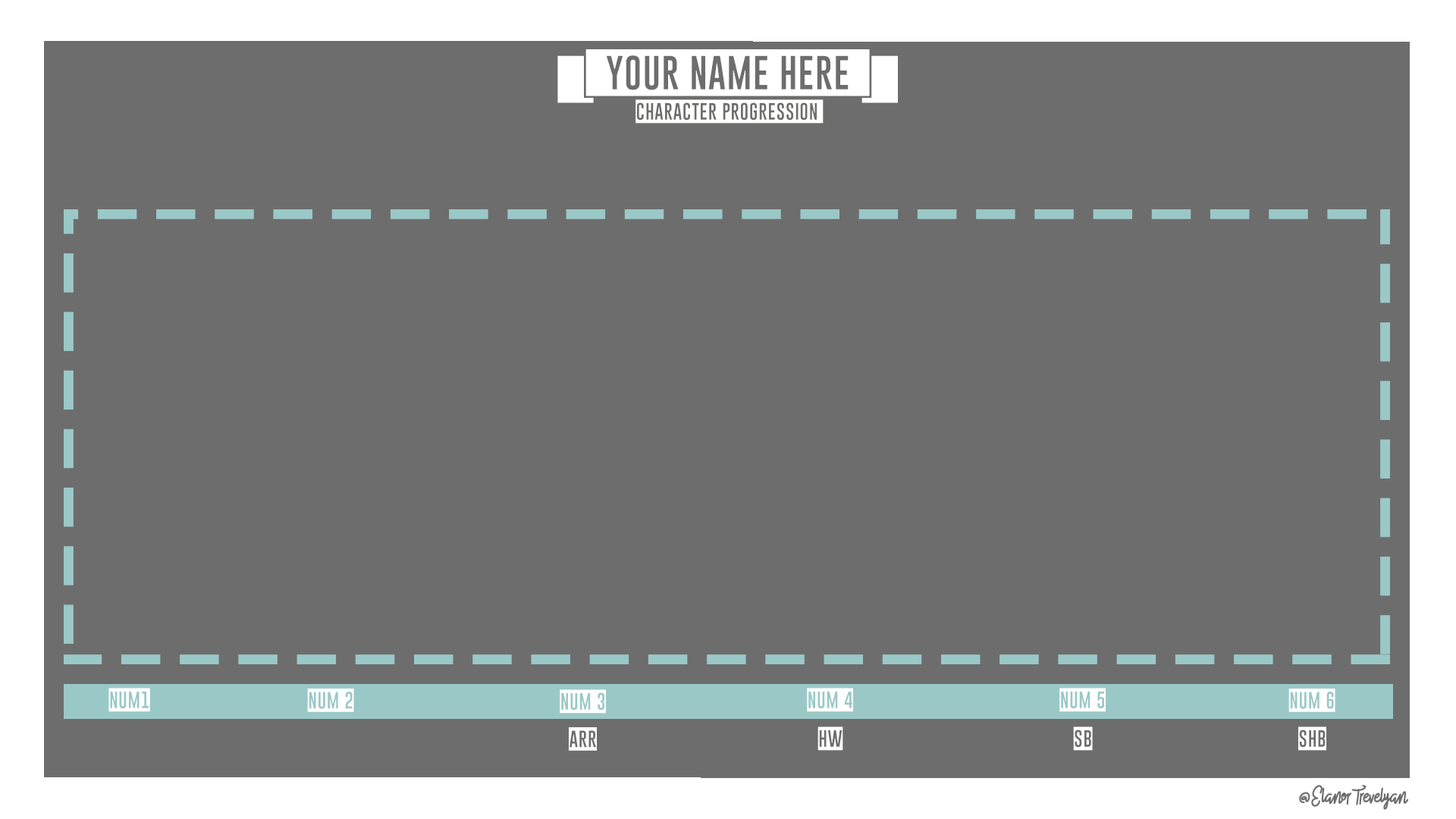
<style>
.page{position:relative;width:1456px;height:819px;background:#6d6d6d}
.page>*{position:absolute;margin:0}
.t1{font:45.5px "GoboldBlocky";letter-spacing:-0.025em;color:#ffffff;font-weight:bold}
.t2{font:22.7px "GoboldBlocky";letter-spacing:-0.025em;color:#fffffe;font-weight:bold}
.t3{font:22.7px "GoboldBlocky";letter-spacing:-0.025em;color:#ffffff;font-weight:bold}
.t4{font:22.7px "Meiloly-RegularScript";letter-spacing:-0.025em;color:#6d6d6d;font-weight:bold}
</style>
<div class="page">
<p class="t1" style="left:557px;top:49px;width:341px;height:54px">[[YOUR NAME HERE]]</p>
<p class="t2" style="left:635px;top:99px;width:189px;height:25px">character progression</p>
<p class="t3" style="left:108px;top:688px;width:42px;height:24px">num1</p>
<p class="t3" style="left:307px;top:689px;width:47px;height:23px">num 2</p>
<p class="t3" style="left:560px;top:689px;width:46px;height:25px">num 3</p>
<p class="t3" style="left:807px;top:688px;width:46px;height:24px">num 4</p>
<p class="t3" style="left:1059px;top:688px;width:47px;height:24px">num 5</p>
<p class="t3" style="left:1288px;top:689px;width:47px;height:23px">num 6</p>
<p class="t3" style="left:569px;top:727px;width:28px;height:24px">ARR</p>
<p class="t3" style="left:817px;top:726px;width:26px;height:25px">HW</p>
<p class="t3" style="left:1073px;top:726px;width:20px;height:25px">SB</p>
<p class="t3" style="left:1298px;top:726px;width:28px;height:25px">SHB</p>
<p class="t4" style="left:1299px;top:785px;width:110px;height:25px">@Elanor Trevelyan</p>
</div>
